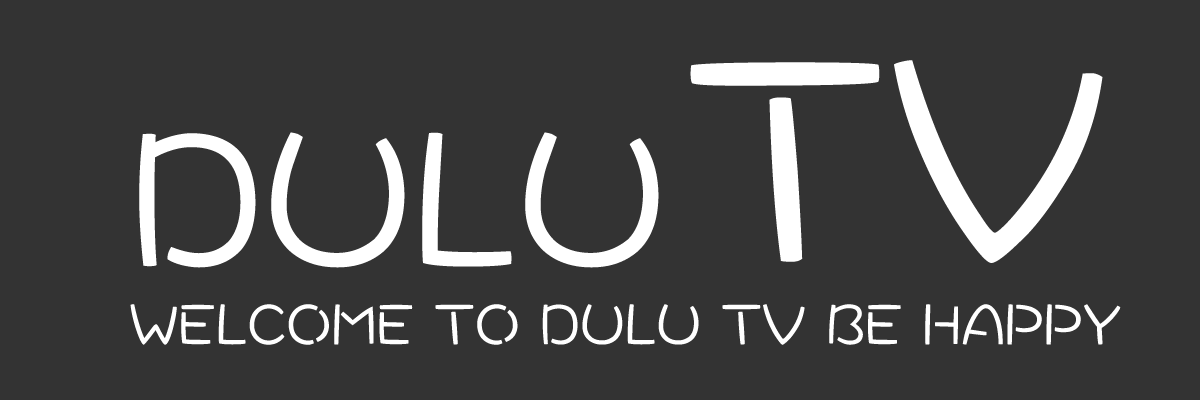
<style>
.page{position:relative;width:1200px;height:400px;background:#333333}
.page>*{position:absolute;margin:0}
.t1{font:300px "DFWaWaTC-W5";color:#ffffff;text-transform:uppercase}
.t2{font:200px "DFWaWaTC-W5";color:#ffffff;text-transform:uppercase}
.t3{font:60px "DFWaWaTC-W5";color:#ffffff;text-transform:uppercase}
</style>
<div class="page">
<p class="t1" style="left:690px;top:60px;width:413px;height:203px">TV</p>
<p class="t2" style="left:139px;top:132px;width:520px;height:136px">dulu</p>
<p class="t3" style="left:130px;top:304px;width:991px;height:41px">welcome to dulu TV BE Happy</p>
</div>
